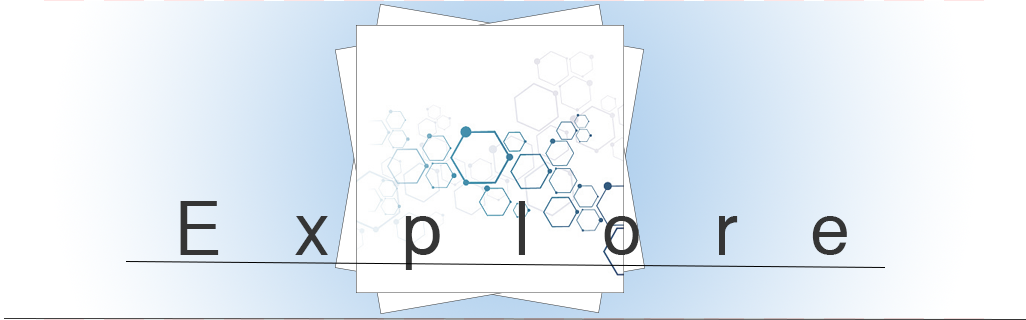
<style>
.page{position:relative;width:1026px;height:320px;background:#ffffff}
.page>*{position:absolute;margin:0}
.t1{font:72px "SansSerif";letter-spacing:1em;color:#353535}
</style>
<div class="page">
<p class="t1" style="left:180px;top:201px;width:667px;height:69px">Explore</p>
</div>
